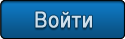
<style>
.page{position:relative;width:125px;height:39px}
.page>*{position:absolute;margin:0}
.t1{font:22px "ArialMT";letter-spacing:0.025em;color:#cee0ec;font-weight:bold;scale:0.89 1}
</style>
<div class="page">
<p class="t1" style="left:35px;top:11px;width:57px;height:17px">Войти</p>
<p class="t1" style="left:35px;top:11px;width:57px;height:17px">Войти</p>
</div>
